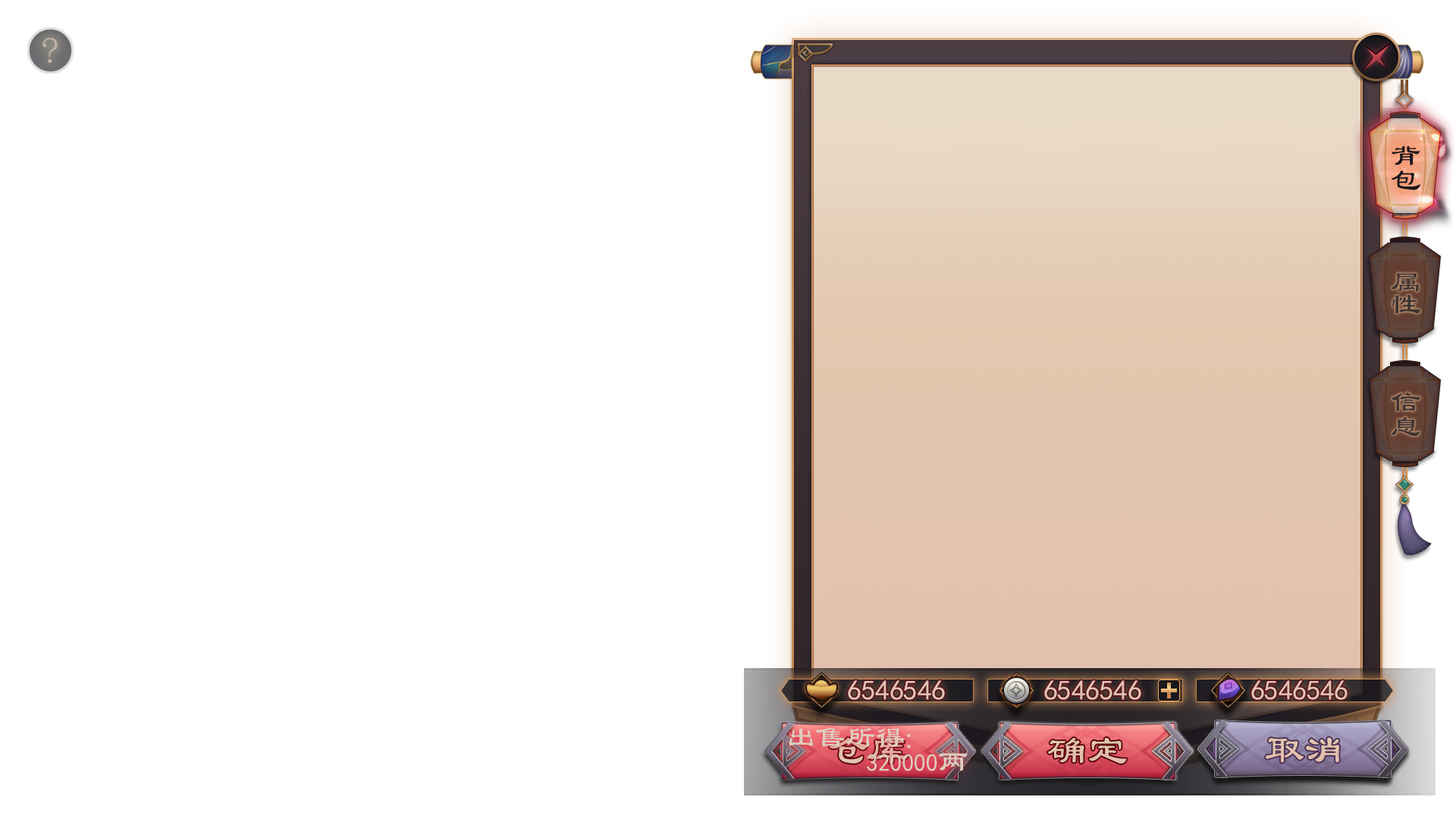
<style>
.page{position:relative;width:1456px;height:819px;background:#ffffff}
.page>*{position:absolute;margin:0}
.t1{font:30.6px "LiSu";color:#1a181d}
.t2{font:30.6px "LiSu";color:#403431}
.t3{font:27.9px "SimHei";color:#e1c3b3}
.t4{font:24.3px/24.3px "SimHei";color:#decdbe}
.t5{font:30.3px/24.3px "LiSu";color:#decdbe}
.t6{font:40.3px "LiSu";color:#e4b1a4}
.t7{font:40.3px "LiSu";color:#e2c2ad}
.t8{font:40.3px "LiSu";color:#e3c2ad}
</style>
<div class="page">
<p class="t1" style="left:1392px;top:146px;width:28px;height:44px">背包</p>
<p class="t2" style="left:1392px;top:273px;width:29px;height:41px">属性</p>
<p class="t2" style="left:1391px;top:392px;width:30px;height:44px">信息</p>
<p class="t3" style="left:848px;top:680px;width:97px;height:20px">6546546</p>
<p class="t3" style="left:1044px;top:680px;width:97px;height:20px">6546546</p>
<p class="t3" style="left:1251px;top:680px;width:97px;height:20px">6546546</p>
<p class="t4" style="left:789px;top:727px;width:179px;height:44px"><span class="t5"> 出售所得：<br></span>        320000<span class="t5">两</span></p>
<p class="t6" style="left:829px;top:737px;width:79px;height:27px">仓库</p>
<p class="t7" style="left:1047px;top:738px;width:80px;height:26px">确定</p>
<p class="t8" style="left:1266px;top:737px;width:73px;height:26px">取消</p>
</div>
